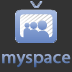
<style>
.page{position:relative;width:72px;height:72px;background:#333333}
.page>*{position:absolute;margin:0}
.t1{font:18px "MyriadPro-Regular";font-weight:bold}
</style>
<div class="page">
<p class="t1" style="left:2px;top:54px;width:69px;height:14px">myspace</p>
</div>
